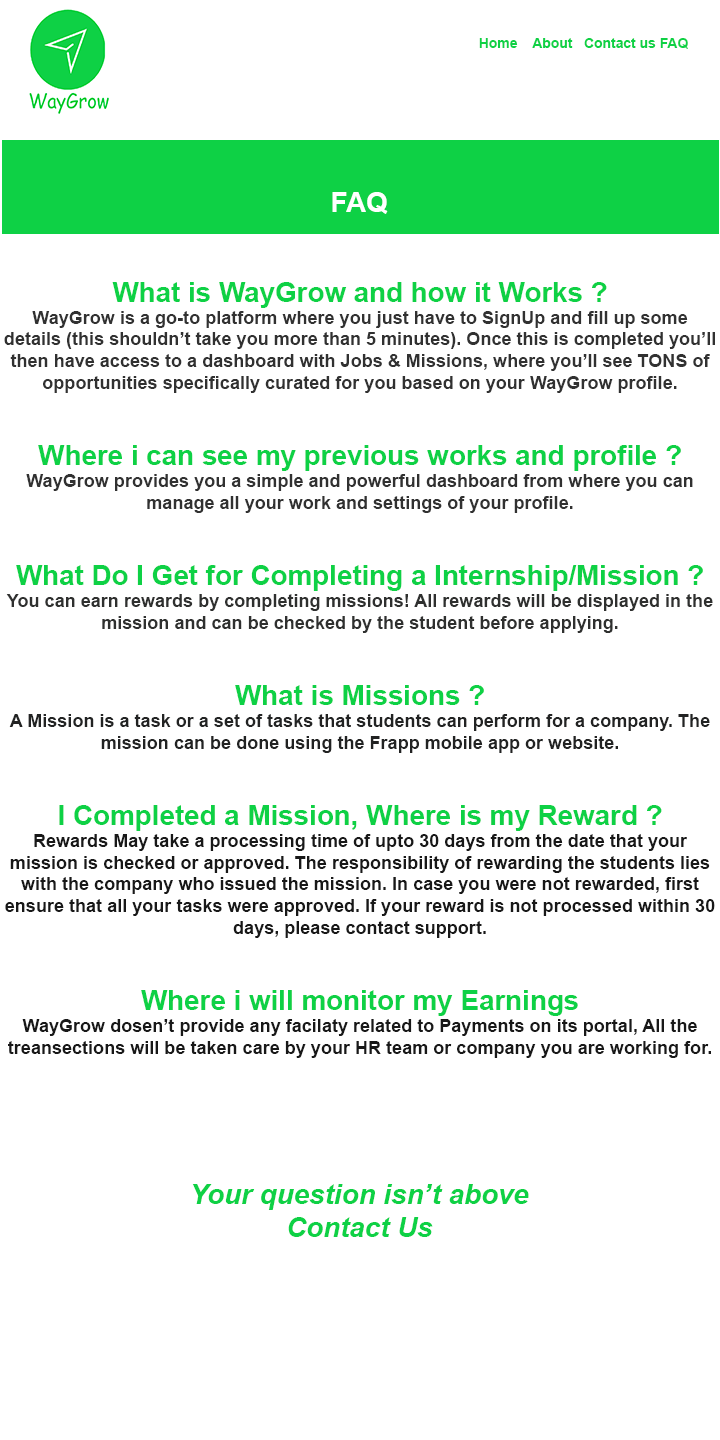
<style>
.page{position:relative;width:720px;height:1440px;background:#ffffff}
.page>*{position:absolute;margin:0}
.t1{font:13.9px "Arial-BoldMT";color:#0ed145}
.t2{font:27.8px "Arial-BoldMT";color:#ffffff}
.t3{font:18.1px "Arial-BoldMT";color:#181818}
.t4{font:27.8px "Arial-BoldMT";color:#0ed145}
.t5{font:18.1px "Arial-BoldMT";color:#313131}
.t6{font:18.1px "Arial-BoldMT";color:#2f302f}
.t7{font:18.1px "Arial-BoldMT";color:#222323}
.t8{font:27.8px "Arial-BoldItalicMT";color:#0ed145}
</style>
<div class="page">
<p class="t1" style="left:479px;top:38px;width:209px;height:11px">Home    About   Contact us FAQ</p>
<p class="t2" style="left:332px;top:192px;width:56px;height:22px">FAQ</p>
<p class="t3" style="left:4px;top:282px;width:711px;height:776px;text-align:center"><span class="t4">What is WayGrow and how it Works ?<br></span><span class="t5">WayGrow is a go-to platform where you just have to SignUp and fill up some details (this shouldn’t take you more than 5 minutes). Once this is completed you’ll then have access to a dashboard with Jobs &amp; Missions, where you’ll see TONS of opportunities specifically curated for you based on your WayGrow profile. <br><br><br></span><span class="t4">Where i can see my previous works and profile ?<br></span><span class="t5">WayGrow provides you a simple and powerful dashboard from where you can manage all your work and settings of your profile. <br><br><br></span><span class="t4">What Do I Get for Completing a Internship/Mission ?<br></span><span class="t6">You can earn rewards by completing missions! All rewards will be displayed in the mission and can be checked by the student before applying.<br><br><br></span><span class="t4">What is Missions ?<br></span><span class="t7">A Mission is a task or a set of tasks that students can perform for a company. The mission can be done using the Frapp mobile app or website.<br><br><br></span><span class="t4">I Completed a Mission, Where is my Reward ?<br></span>Rewards May take a processing time of upto 30 days from the date that your mission is checked or approved. The responsibility of rewarding the students lies with the company who issued the mission. In case you were not rewarded, first ensure that all your tasks were approved. If your reward is not processed within 30 days, please contact support.<br><br><br><span class="t4">Where i will monitor my Earnings<br></span>WayGrow dosen’t provide any facilaty related to Payments on its portal, All the treansections will be taken care by your HR team or company you are working for.</p>
<p class="t8" style="left:192px;top:1184px;width:337px;height:53px;text-align:center">Your question isn’t above <br>Contact Us</p>
</div>
